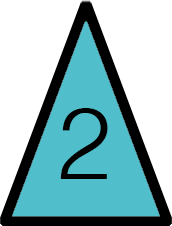
<style>
.page{position:relative;width:172px;height:226px;background:#ffffff}
.page>*{position:absolute;margin:0}
.t1{font:100px "Helvetica-Light";color:#000000}
</style>
<div class="page">
<p class="t1" style="left:60px;top:108px;width:48px;height:71px">2</p>
</div>
